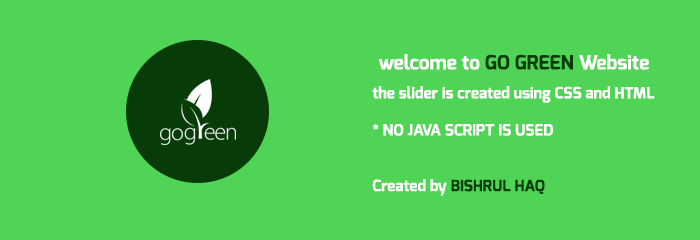
<style>
.page{position:relative;width:700px;height:240px;background:#4fd455}
.page>*{position:absolute;margin:0}
.t1{font:19.5px "Exo-Bold";color:#ffffff}
.t2{font:19.5px "Exo-Bold";color:#073c09}
.t3{font:15.5px "Exo-Bold";color:#ffffff}
.t4{font:15.5px "Exo-Bold";color:#073c09}
</style>
<div class="page">
<p class="t1" style="left:378px;top:54px;width:271px;height:16px">welcome to <span class="t2">GO GREEN </span>Website</p>
<p class="t3" style="left:372px;top:86px;width:283px;height:110px">the slider is created using CSS and HTML<br><br>* NO JAVA SCRIPT IS USED<br><br><br>Created by <span class="t4">BISHRUL HAQ</span></p>
</div>
